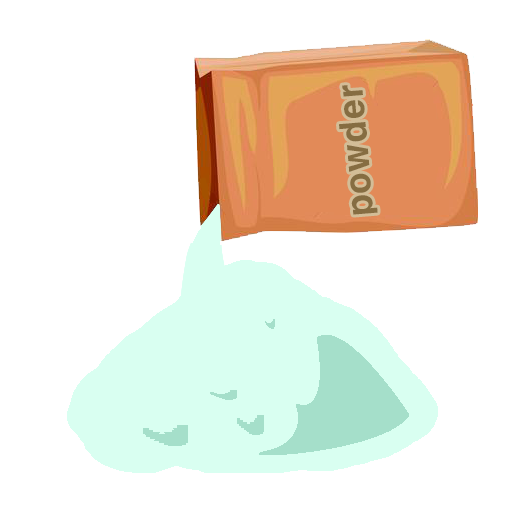
<style>
.page{position:relative;width:512px;height:512px;background:#ffffff}
.page>*{position:absolute;margin:0}
.t1{font:34.4px "H2gtrE";color:#866d42}
</style>
<div class="page">
<p class="t1" style="left:339px;top:85px;width:39px;height:130px;rotate:-95deg">powder</p>
</div>
